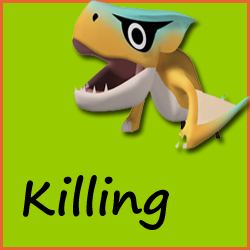
<style>
.page{position:relative;width:250px;height:250px;background:#99cc00}
.page>*{position:absolute;margin:0}
.t1{font:48px "SegoePrint-Bold";color:#000000}
</style>
<div class="page">
<p class="t1" style="left:23px;top:175px;width:146px;height:55px">Killing</p>
</div>
